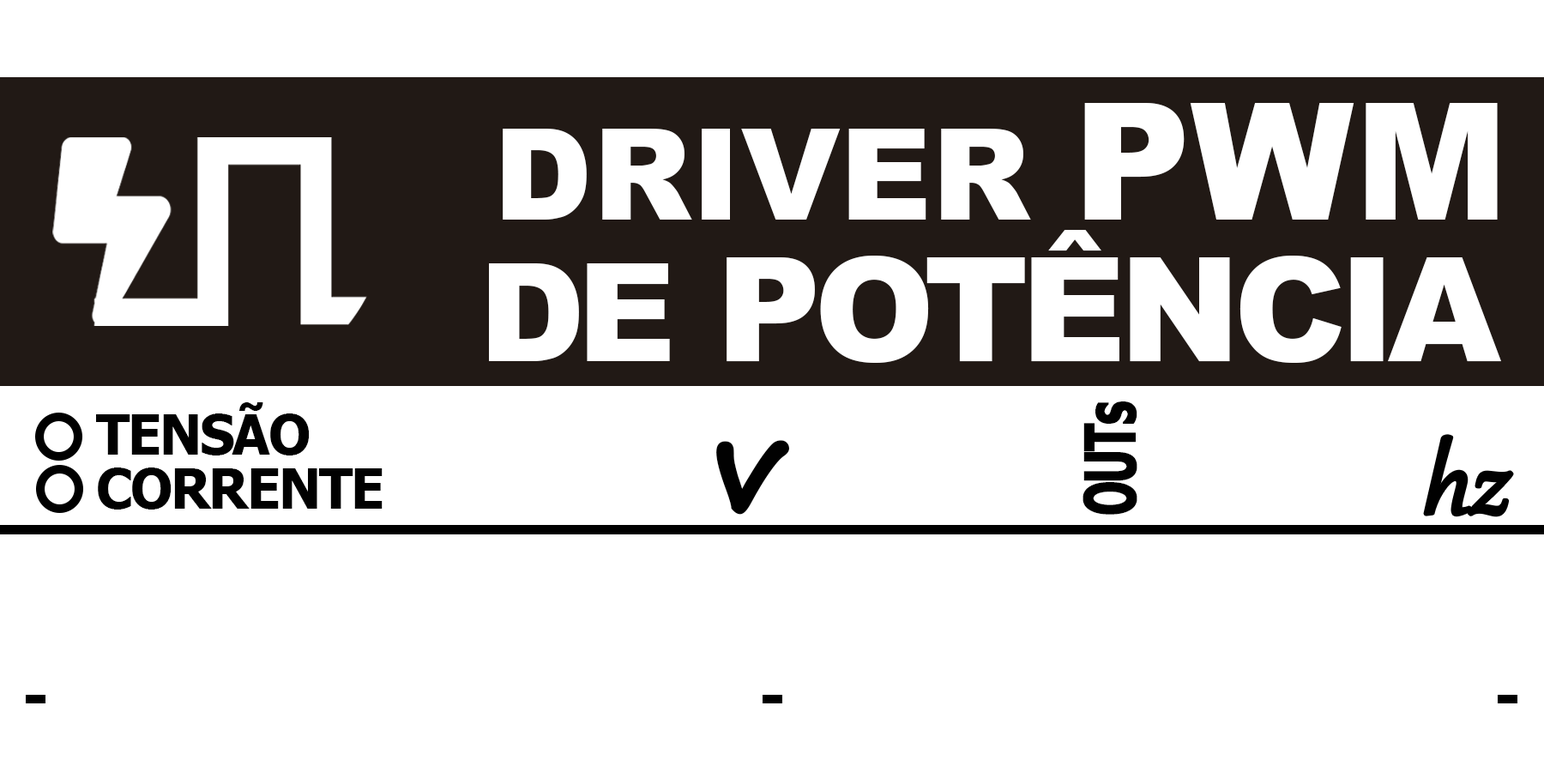
<style>
.page{position:relative;width:1544px;height:772px;background:#ffffff}
.page>*{position:absolute;margin:0}
.t1{font:145.3px/141.6px "Arial-Black";letter-spacing:-0.05em;color:#ffffff}
.t2{font:127.1px/141.6px "Arial-Black";color:#ffffff}
.t3{font:163.4px/141.6px "Arial-Black";color:#ffffff}
.t4{font:136.2px/141.6px "Arial-Black";letter-spacing:-0.05em;color:#ffffff}
.t5{font:69.9px "Tahoma-Bold";letter-spacing:-0.05em;color:#010101;font-weight:bold;scale:0.63 1}
.t6{font:54.5px/54.5px "Tahoma-Bold";letter-spacing:-0.03em;color:#010101}
.t7{font:114.6px "Gabriola";letter-spacing:-0.025em;color:#010101;font-weight:bold;font-style:italic}
.t8{font:127.1px "SegoePrint-Bold";letter-spacing:-0.01em;color:#010101;font-weight:bold}
</style>
<div class="page">
<p class="t1" style="left:489px;top:103px;width:1012px;height:260px;text-align:right"><span class="t2">DRIVER </span><span class="t3">PWM<br></span><span class="t4">DE </span>POTÊNCIA</p>
<p class="t5" style="left:1083px;top:402px;width:55px;height:113px;rotate:-90deg">OUTs</p>
<p class="t6" style="left:96px;top:402px;width:287px;height:108px">TENSÃO<br>CORRENTE</p>
<p class="t7" style="left:1425px;top:436px;width:88px;height:80px">hz</p>
<p class="t8" style="left:716px;top:440px;width:74px;height:75px">v</p>
</div>
